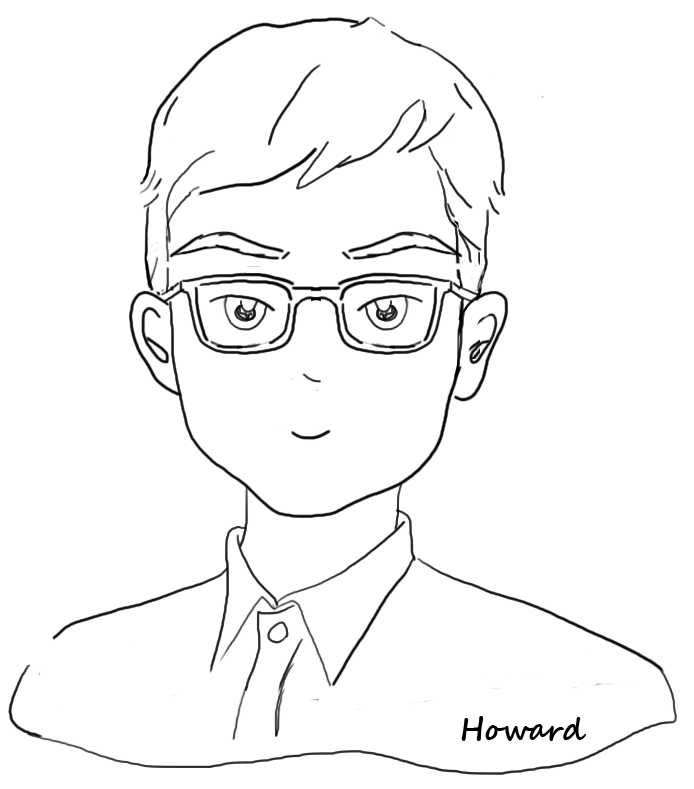
<style>
.page{position:relative;width:694px;height:789px;background:#ffffff}
.page>*{position:absolute;margin:0}
.t1{font:30px "SegoeScript-Bold";color:#000000}
</style>
<div class="page">
<p class="t1" style="left:461px;top:716px;width:125px;height:25px">Howard</p>
</div>
